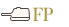
<style>
.page{position:relative;width:69px;height:27px;background:#ffffff}
.page>*{position:absolute;margin:0}
.t1{font:18px "RyuminPro-ExBold";letter-spacing:-0.08em;color:#ae9442;scale:0.9 1}
</style>
<div class="page">
<p class="t1" style="left:33px;top:7px;width:20px;height:14px">FP</p>
</div>
